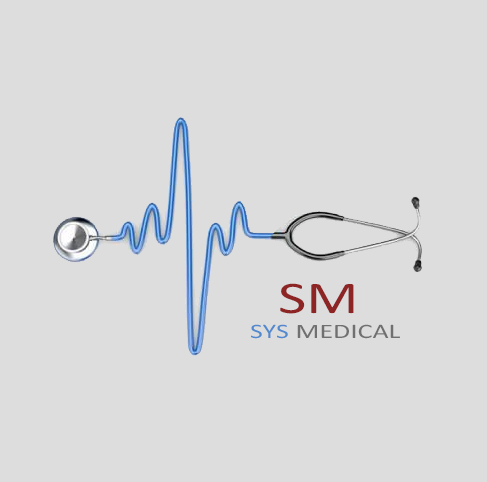
<style>
.page{position:relative;width:487px;height:482px;background:#dddddd}
.page>*{position:absolute;margin:0}
.t1{font:20.8px "Calibri";color:#707070;scale:1.35 1}
.t2{font:45.8px "Calibri";color:#8d2525;scale:1.35 1}
.t3{font:20.8px "Calibri";color:#5289ce;scale:1.35 1}
</style>
<div class="page">
<p class="t1" style="left:251px;top:283px;width:149px;height:56px"><span class="t2">  SM<br></span><span class="t3">SYS</span> MEDICAL</p>
</div>
